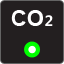
<style>
.page{position:relative;width:64px;height:64px;background:#231f20}
.page>*{position:absolute;margin:0}
.t1{font:22px "Arial-BoldMT";color:#ffffff}
.t2{font:24px "MicrosoftYaHei-Bold";color:#ffffff;font-variant:small-caps}
</style>
<div class="page">
<p class="t1" style="left:11px;top:10px;width:32px;height:16px">CO</p>
<p class="t2" style="left:45px;top:15px;width:8px;height:11px">2</p>
</div>
